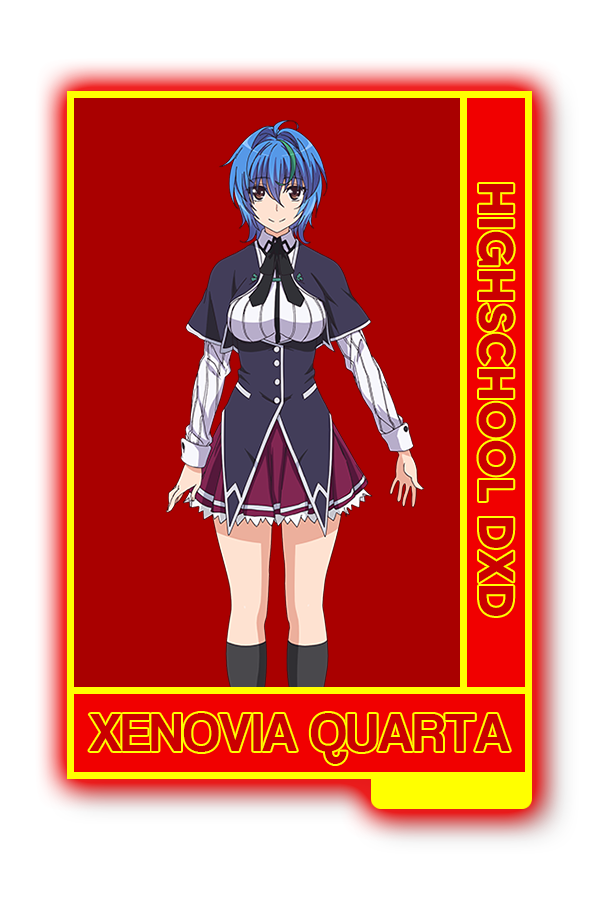
<style>
.page{position:relative;width:600px;height:900px;background:#a90000}
.page>*{position:absolute;margin:0}
.t1{font:48.8px "MADETOMMY-Bold";color:#ca0000}
.t2{font:54.5px "CoolveticaRg-Regular";color:#ca0000}
</style>
<div class="page">
<p class="t1" style="left:478px;top:184px;width:36px;height:432px;rotate:90deg">HIGHSCHOOL DXD</p>
<p class="t2" style="left:89px;top:713px;width:421px;height:51px">XENOVIA QUARTA</p>
</div>
